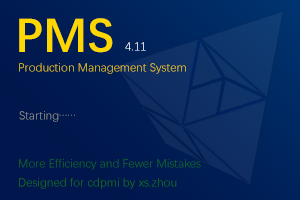
<style>
.page{position:relative;width:300px;height:200px}
.page>*{position:absolute;margin:0}
.t1{font:48px "DengXian-Bold";color:#ffd700}
.t2{font:12px "DengXian";color:#ffffff}
.t3{font:12px "DengXian"}
.t4{font:12px "DengXian";color:#8f8f8f}
.t5{font:12px "DengXian";color:#176420}
.t6{font:12px "DengXian";color:#1a6c17}
</style>
<div class="page">
<p class="t1" style="left:19px;top:18px;width:94px;height:35px">PMS</p>
<p class="t2" style="left:125px;top:42px;width:21px;height:9px">4.11</p>
<p class="t3" style="left:19px;top:63px;width:167px;height:11px">Production Management System</p>
<p class="t4" style="left:19px;top:111px;width:56px;height:11px">Starting……</p>
<p class="t5" style="left:19px;top:159px;width:182px;height:11px">More Efficiency and Fewer Mistakes</p>
<p class="t6" style="left:19px;top:178px;width:158px;height:11px">Designed for cdpmi by xs.zhou</p>
</div>
